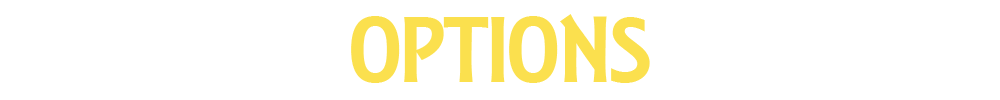
<style>
.page{position:relative;width:1000px;height:100px;background:#ffffff}
.page>*{position:absolute;margin:0}
.t1{font:100px "ARESSENCE";color:#fbe04e}
</style>
<div class="page">
<p class="t1" style="left:351px;top:14px;width:299px;height:69px">OPTIONS</p>
</div>
